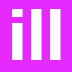
<style>
.page{position:relative;width:72px;height:72px;background:#e62aff}
.page>*{position:absolute;margin:0}
.t1{font:72px "HelveticaNeue-Bold";color:#ffffff}
</style>
<div class="page">
<p class="t1" style="left:12px;top:9px;width:49px;height:51px">ill</p>
</div>
